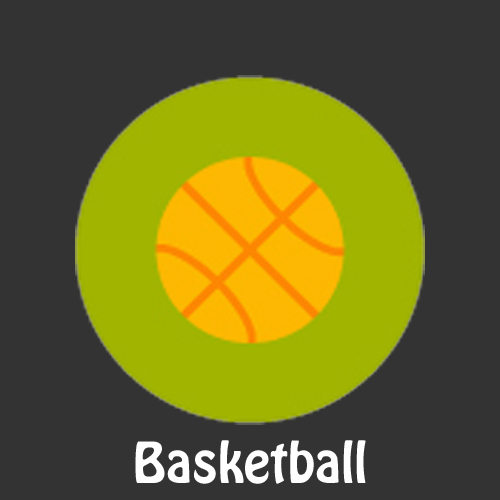
<style>
.page{position:relative;width:500px;height:500px;background:#333333}
.page>*{position:absolute;margin:0}
.t1{font:50px "HoboStd";color:#fefefe}
</style>
<div class="page">
<p class="t1" style="left:135px;top:440px;width:231px;height:44px">Basketball</p>
</div>
